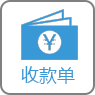
<style>
.page{position:relative;width:95px;height:95px;background:#ffffff}
.page>*{position:absolute;margin:0}
.t1{font:18px "MicrosoftYaHei";color:#3998d6}
</style>
<div class="page">
<p class="t1" style="left:21px;top:66px;width:54px;height:18px">收款单</p>
</div>
